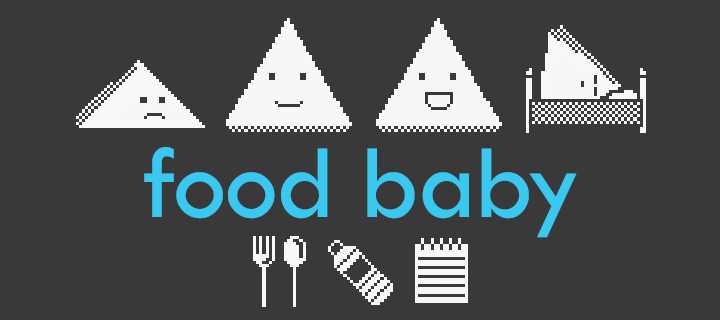
<style>
.page{position:relative;width:720px;height:320px;background:#393939}
.page>*{position:absolute;margin:0}
.t1{font:107.4px "TwCenMT-Regular";letter-spacing:-0.02em;color:#39c8ef}
</style>
<div class="page">
<p class="t1" style="left:144px;top:147px;width:433px;height:91px">food baby</p>
</div>
